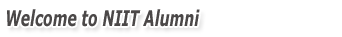
<style>
.page{position:relative;width:342px;height:37px;background:#ffffff}
.page>*{position:absolute;margin:0}
.t1{font:21.6px "Verdana-BoldItalic";color:#4b4848;scale:0.65 1}
</style>
<div class="page">
<p class="t1" style="left:7px;top:9px;width:193px;height:18px">Welcome to NIIT Alumni</p>
</div>
